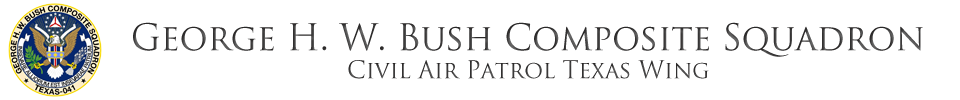
<style>
.page{position:relative;width:960px;height:100px;background:#ffffff}
.page>*{position:absolute;margin:0}
.t1{font:36px/18px "TrajanPro-Regular";letter-spacing:-0.01em}
.t2{font:24px/28px "TrajanPro-Regular";letter-spacing:-0.01em}
</style>
<div class="page">
<p class="t1" style="left:133px;top:22px;width:790px;height:57px;text-align:center">George H. W. Bush Composite Squadron<br><span class="t2">Civil Air Patrol Texas Wing</span></p>
</div>
